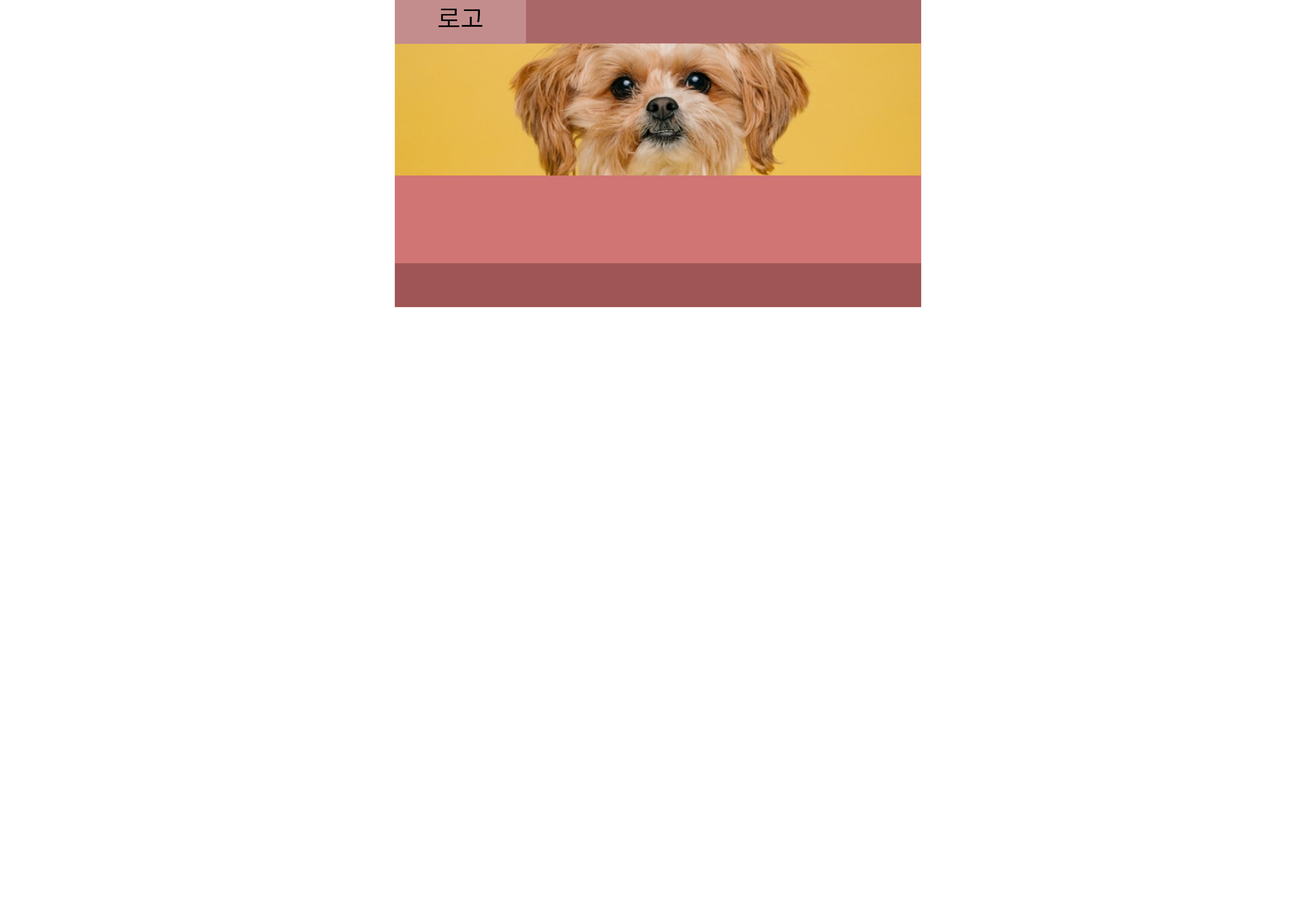
<style>
.page{position:relative;width:1316px;height:906px;background:#ffffff}
.page>*{position:absolute;margin:0}
.t1{font:26.3px "SUIT-Regular";color:#000000}
</style>
<div class="page">
<p class="t1" style="left:438px;top:8px;width:45px;height:19px">로고</p>
</div>
